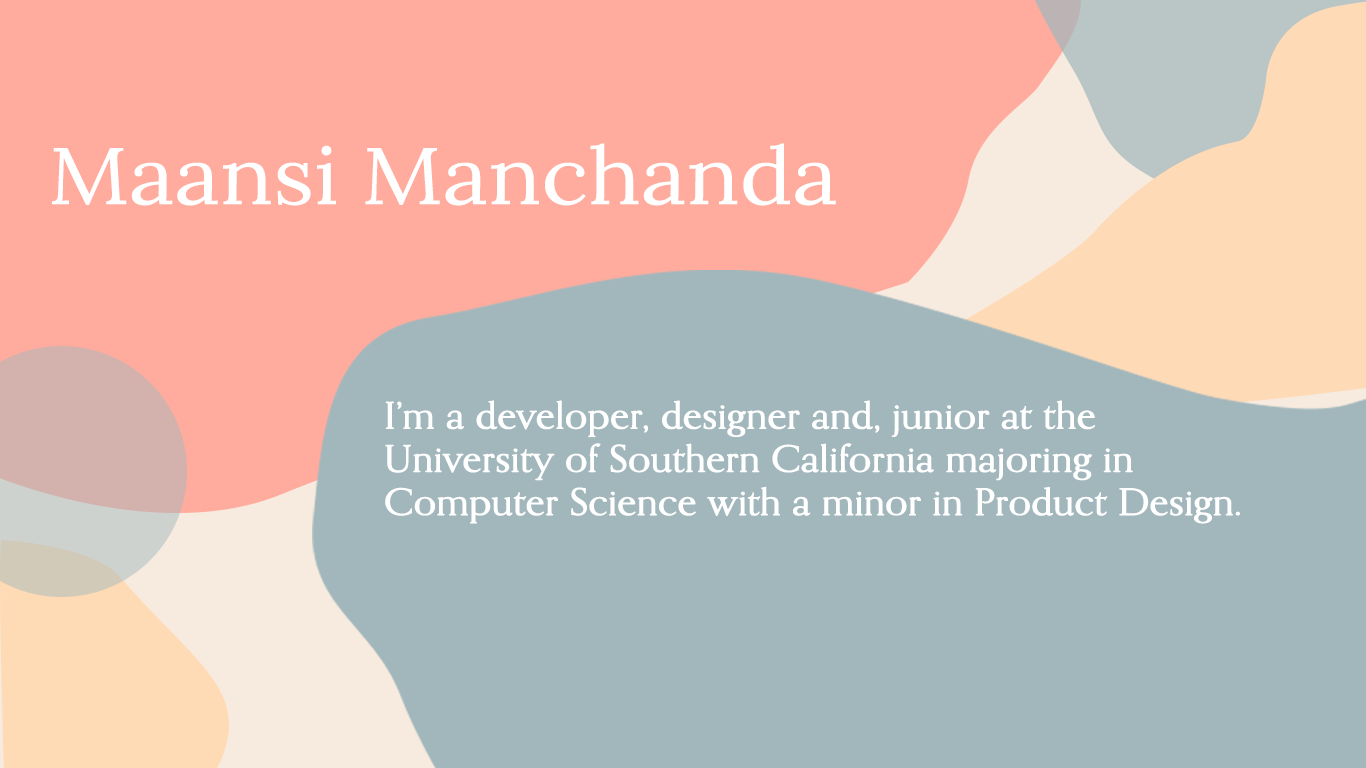
<style>
.page{position:relative;width:1366px;height:768px;background:#a2b7bc}
.page>*{position:absolute;margin:0}
.t1{font:80px "Lora-Regular";color:#ffffff;font-weight:bold;scale:1.1 1}
.t2{font:36px "OrpheusPro";color:#ffffff;font-weight:bold;scale:1.1 1}
</style>
<div class="page">
<p class="t1" style="left:52px;top:143px;width:784px;height:63px">Maansi Manchanda</p>
<p class="t2" style="left:385px;top:400px;width:855px;height:124px">I’m a developer, designer and, junior at the <br>University of Southern California majoring in <br>Computer Science with a minor in Product Design.</p>
</div>
